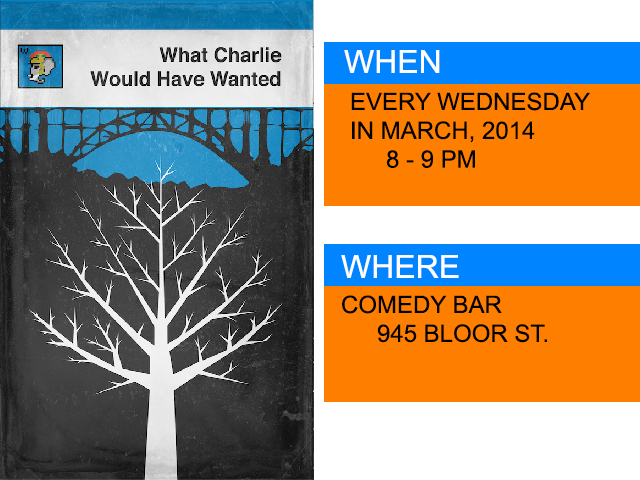
<style>
.page{position:relative;width:640px;height:480px;background:#fe7f00}
.page>*{position:absolute;margin:0}
.t1{font:32px "ArialMT";color:#fefefe}
.t2{font:24px "ArialMT";color:#000000}
</style>
<div class="page">
<p class="t1" style="left:344px;top:50px;width:96px;height:23px">WHEN</p>
<p class="t2" style="left:351px;top:92px;width:239px;height:76px">EVERY WEDNESDAY<br>IN MARCH, 2014<br> 8 - 9 PM</p>
<p class="t1" style="left:341px;top:255px;width:118px;height:23px">WHERE</p>
<p class="t2" style="left:342px;top:295px;width:205px;height:48px">COMEDY BAR<br> 945 BLOOR ST.</p>
</div>
